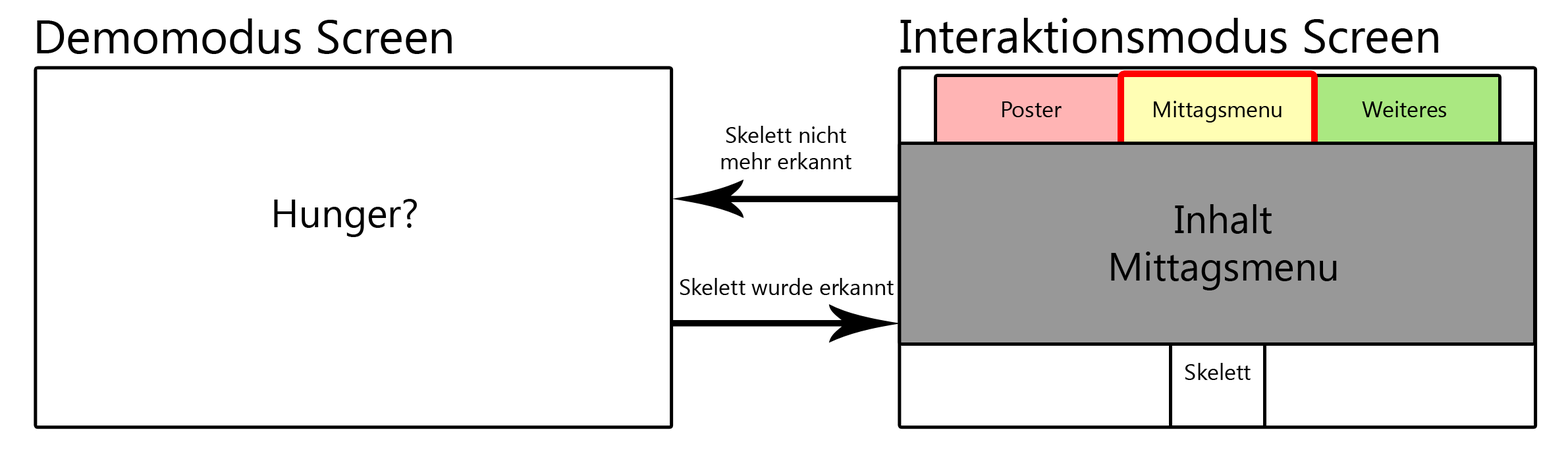
<style>
.page{position:relative;width:1568px;height:461px;background:#ffffff}
.page>*{position:absolute;margin:0}
.t1{font:47.4px "SegoeUI";color:#000000}
.t2{font:22.4px "SegoeUI";color:#000000}
.t3{font:39.5px "SegoeUI";color:#000000}
</style>
<div class="page">
<p class="t1" style="left:900px;top:18px;width:538px;height:35px">Interaktionsmodus Screen</p>
<p class="t1" style="left:37px;top:18px;width:415px;height:36px">Demomodus Screen</p>
<p class="t2" style="left:1002px;top:101px;width:60px;height:16px">Poster</p>
<p class="t2" style="left:1154px;top:101px;width:128px;height:21px">Mittagsmenu</p>
<p class="t2" style="left:1362px;top:101px;width:84px;height:16px">Weiteres</p>
<p class="t2" style="left:721px;top:126px;width:131px;height:43px;text-align:center">Skelett nicht<br>mehr erkannt</p>
<p class="t3" style="left:274px;top:199px;width:143px;height:38px">Hunger?</p>
<p class="t3" style="left:1111px;top:204px;width:226px;height:86px;text-align:center">Inhalt<br>Mittagsmenu</p>
<p class="t2" style="left:680px;top:278px;width:214px;height:17px">Skelett wurde erkannt</p>
<p class="t2" style="left:1185px;top:363px;width:66px;height:17px">Skelett</p>
</div>
